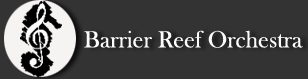
<style>
.page{position:relative;width:308px;height:79px;background:#333333}
.page>*{position:absolute;margin:0}
.t1{font:24px "BaskOldFace";color:#fcfcfc}
</style>
<div class="page">
<p class="t1" style="left:84px;top:30px;width:219px;height:18px">Barrier Reef Orchestra</p>
</div>
